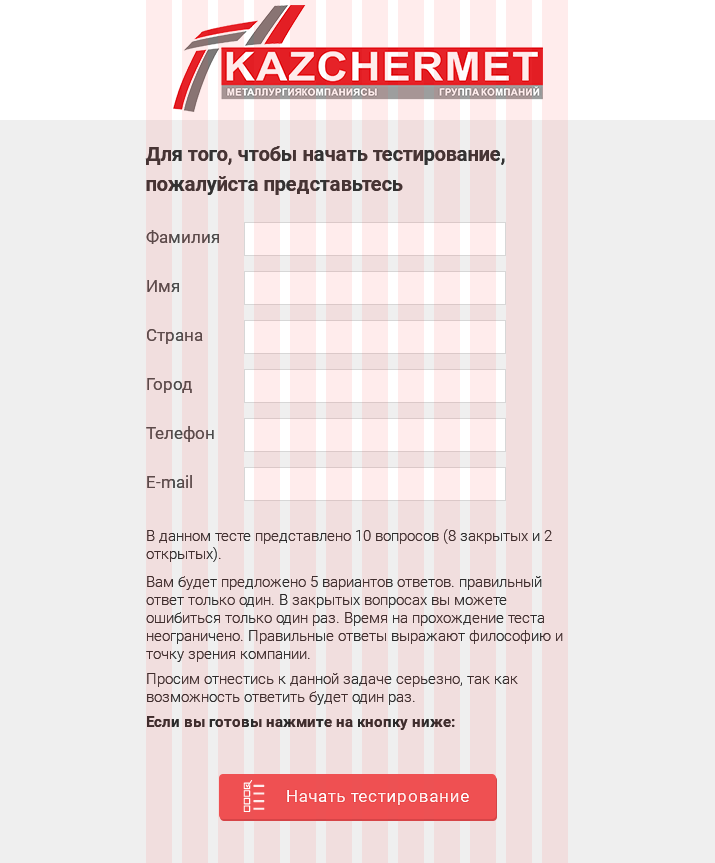
<style>
.page{position:relative;width:715px;height:863px;background:#efefef}
.page>*{position:absolute;margin:0}
.t1{font:20px/30px "Roboto-Bold";color:#323232}
.t2{font:17px "Roboto-Regular";color:#4a4a4a}
.t3{font:15px "Roboto-Light";color:#2a2a2a}
.t4{font:15px/28px "Roboto-Light";color:#2a2a2a}
.t5{font:15px/25px "Roboto-Light";color:#2a2a2a}
.t6{font:15px/25px "Roboto-Bold";color:#2a2a2a}
.t7{font:17px "Roboto-Regular";letter-spacing:0.04em;color:#ffffff}
</style>
<div class="page">
<p class="t1" style="left:145px;top:146px;width:360px;height:49px">Для того, чтобы начать тестирование,<br>пожалуйста представьтесь</p>
<p class="t2" style="left:146px;top:230px;width:73px;height:14px">Фамилия</p>
<p class="t2" style="left:147px;top:280px;width:32px;height:12px">Имя</p>
<p class="t2" style="left:147px;top:329px;width:56px;height:15px">Страна</p>
<p class="t2" style="left:147px;top:378px;width:45px;height:15px">Город</p>
<p class="t2" style="left:146px;top:426px;width:68px;height:16px">Телефон</p>
<p class="t2" style="left:147px;top:475px;width:45px;height:13px">E-mail</p>
<p class="t3" style="left:146px;top:529px;width:417px;height:201px">В данном тесте представлено 10 вопросов (8 закрытых и 2 открытых).<br><span class="t4">Вам будет предложено 5 вариантов ответов. </span>правильный ответ только один. В закрытых вопросах вы можете ошибиться только один раз. Время на прохождение теста неограничено. Правильные ответы выражают философию и точку зрения компании.<br><span class="t5">Просим отнестись к данной задаче серьезно, так </span>как возможность ответить будет один раз.<br><span class="t6">Если вы готовы нажмите на кнопку ниже:</span></p>
<p class="t7" style="left:287px;top:790px;width:182px;height:15px">Начать тестирование</p>
</div>
